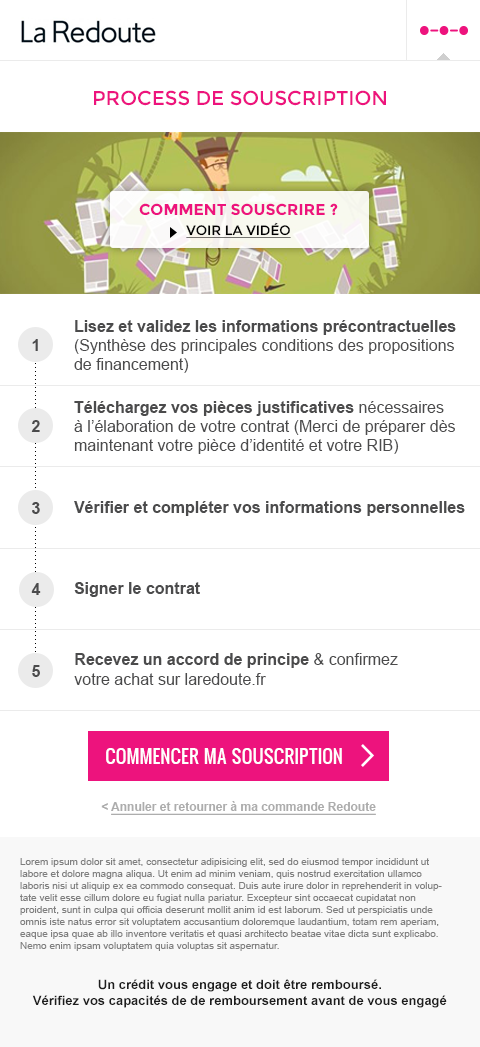
<style>
.page{position:relative;width:480px;height:1047px;background:#ffffff}
.page>*{position:absolute;margin:0}
.t1{font:20px "Montserrat-Regular";color:#ed137d;text-transform:uppercase}
.t2{font:15.6px "Montserrat-Bold";color:#ed137d;text-transform:uppercase}
.t3{font:13.4px/20.1px "Montserrat-Regular";color:#000000;text-transform:uppercase;text-decoration:underline}
.t4{font:16px "ArialMT";color:#4b4b4c}
.t5{font:16px "Arial-BoldMT";color:#4b4b4c}
.t6{font:16px "ArialMT"}
.t7{font:18px "Oswald";color:#ffffff;text-transform:uppercase}
.t8{font:12px "Arial-BoldMT";color:#adadad;text-decoration:underline}
.t9{font:12px "Arial-BoldMT";color:#adadad}
.t10{font:10px "ArialMT";color:#7f7f7f}
.t11{font:13px "Arial-BoldMT";color:#1d1d1d}
</style>
<div class="page">
<p class="t1" style="left:94px;top:90px;width:292px;height:16px">Process de souscription</p>
<p class="t2" style="left:139px;top:203px;width:199px;height:35px;text-align:center">Comment souscrire ?<br><span class="t3">Voir la vidéo</span></p>
<p class="t4" style="left:74px;top:320px;width:382px;height:53px"><span class="t5">Lisez et validez les informations précontractuelles</span> (Synthèse des principales conditions des propositions de financement)</p>
<p class="t5" style="left:32px;top:339px;width:6px;height:12px">1</p>
<p class="t6" style="left:35px;top:351px;width:1px;height:325px;rotate:90deg">..................................................................................</p>
<p class="t4" style="left:74px;top:401px;width:381px;height:53px"><span class="t5">Téléchargez vos pièces justificatives</span> nécessaires<br>à l’élaboration de votre contrat (Merci de préparer dès maintenant votre pièce d’identité et votre RIB)</p>
<p class="t5" style="left:31px;top:420px;width:9px;height:12px">2</p>
<p class="t5" style="left:32px;top:502px;width:8px;height:12px">3</p>
<p class="t5" style="left:74px;top:501px;width:391px;height:15px">Vérifier et compléter vos informations personnelles</p>
<p class="t5" style="left:74px;top:582px;width:126px;height:15px">Signer le contrat</p>
<p class="t5" style="left:31px;top:583px;width:10px;height:12px">4</p>
<p class="t4" style="left:74px;top:653px;width:324px;height:32px"><span class="t5">Recevez un accord de principe</span> &amp; confirmez votre achat sur laredoute.fr</p>
<p class="t5" style="left:32px;top:665px;width:8px;height:12px">5</p>
<p class="t7" style="left:106px;top:748px;width:236px;height:16px">commencer ma souscription</p>
<p class="t8" style="left:101px;top:801px;width:275px;height:14px"><span class="t9">&lt; </span>Annuler et retourner à ma commande Redoute</p>
<p class="t10" style="left:20px;top:858px;width:422px;height:93px">Lorem ipsum dolor sit amet, consectetur adipisicing elit, sed do eiusmod tempor incididunt ut labore et dolore magna aliqua. Ut enim ad minim veniam, quis nostrud exercitation ullamco laboris nisi ut aliquip ex ea commodo consequat. Duis aute irure dolor in reprehenderit in voluptate velit esse cillum dolore eu fugiat nulla pariatur. Excepteur sint occaecat cupidatat non proident, sunt in culpa qui officia deserunt mollit anim id est laborum. Sed ut perspiciatis unde omnis iste natus error sit voluptatem accusantium doloremque laudantium, totam rem aperiam, eaque ipsa quae ab illo inventore veritatis et quasi architecto beatae vitae dicta sunt explicabo. Nemo enim ipsam voluptatem quia voluptas sit aspernatur.</p>
<p class="t11" style="left:32px;top:979px;width:415px;height:29px;text-align:center">Un crédit vous engage et doit être remboursé.<br>Vérifiez vos capacités de de remboursement avant de vous engagé</p>
</div>
